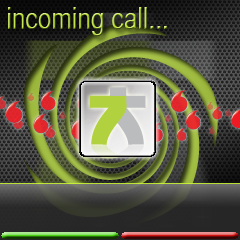
<style>
.page{position:relative;width:240px;height:240px}
.page>*{position:absolute;margin:0}
.t1{font:30px "HelveticaCYPlain"}
</style>
<div class="page">
<p class="t1" style="left:8px;top:7px;width:159px;height:29px">incoming call...</p>
</div>
